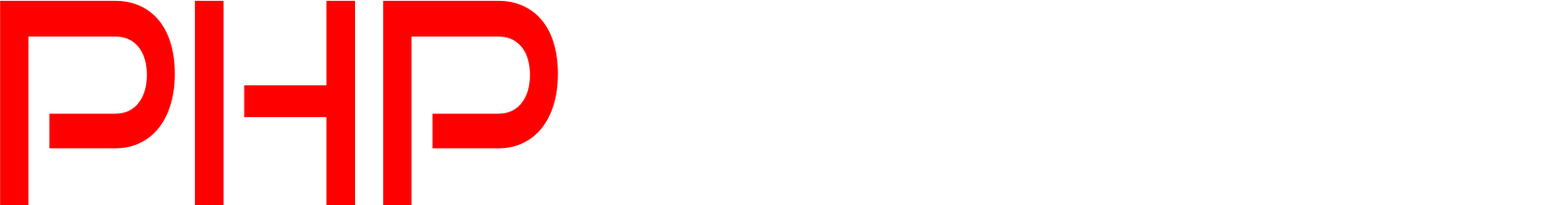
<style>
.page{position:relative;width:1568px;height:205px;background:#ffffff}
.page>*{position:absolute;margin:0}
.t1{font:281px "GoodTimesRg-Regular";color:#ff0000;scale:0.8 1}
</style>
<div class="page">
<p class="t1" style="left:0px;top:0px;width:558px;height:206px">PHP</p>
</div>
